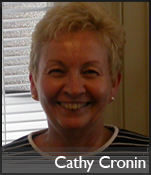
<style>
.page{position:relative;width:151px;height:175px}
.page>*{position:absolute;margin:0}
.t1{font:16.7px "GillSansMT";color:#fffefe}
</style>
<div class="page">
<p class="t1" style="left:55px;top:156px;width:91px;height:16px">Cathy Cronin</p>
</div>
